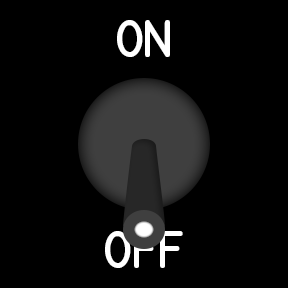
<style>
.page{position:relative;width:288px;height:288px;background:#000000}
.page>*{position:absolute;margin:0}
.t1{font:37px "MS-33558-Regular";letter-spacing:-0.04em;color:#ffffff}
</style>
<div class="page">
<p class="t1" style="left:117px;top:20px;width:53px;height:37px">ON</p>
<p class="t1" style="left:105px;top:231px;width:78px;height:37px">OFF</p>
</div>
